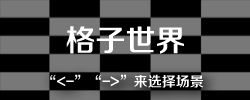
<style>
.page{position:relative;width:250px;height:100px;background:#000000}
.page>*{position:absolute;margin:0}
.t1{font:30px "FZZZHONGJW--GB1-0";color:#ffffff}
.t2{font:14px "FZZZHONGJW--GB1-0";color:#ffffff}
</style>
<div class="page">
<p class="t1" style="left:66px;top:26px;width:118px;height:28px">格子世界</p>
<p class="t2" style="left:50px;top:74px;width:153px;height:14px">“&lt;-”“-&gt;”来选择场景</p>
</div>
